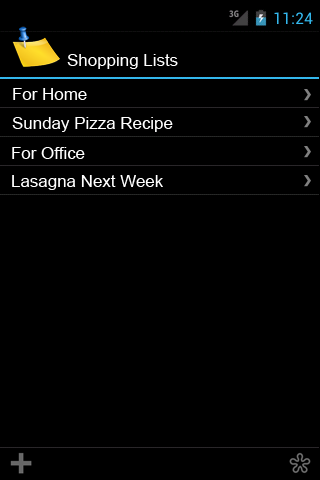
<style>
.page{position:relative;width:320px;height:480px;background:#000000}
.page>*{position:absolute;margin:0}
.t1{font:16.9px "ArialMT";color:#ffffff}
</style>
<div class="page">
<p class="t1" style="left:67px;top:54px;width:111px;height:15px">Shopping Lists</p>
<p class="t1" style="left:13px;top:88px;width:74px;height:12px">For Home</p>
<p class="t1" style="left:12px;top:117px;width:161px;height:15px">Sunday Pizza Recipe</p>
<p class="t1" style="left:12px;top:147px;width:73px;height:12px">For Office</p>
<p class="t1" style="left:12px;top:175px;width:151px;height:15px">Lasagna Next Week</p>
</div>
